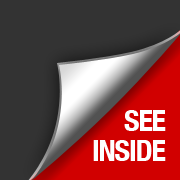
<style>
.page{position:relative;width:180px;height:180px;background:#333333}
.page>*{position:absolute;margin:0}
.t1{font:30px/30px "HelveticaNeue-CondensedBold";letter-spacing:-0.04em;color:#ffffff}
</style>
<div class="page">
<p class="t1" style="left:93px;top:110px;width:73px;height:51px;text-align:right">SEE<br>INSIDE</p>
</div>
